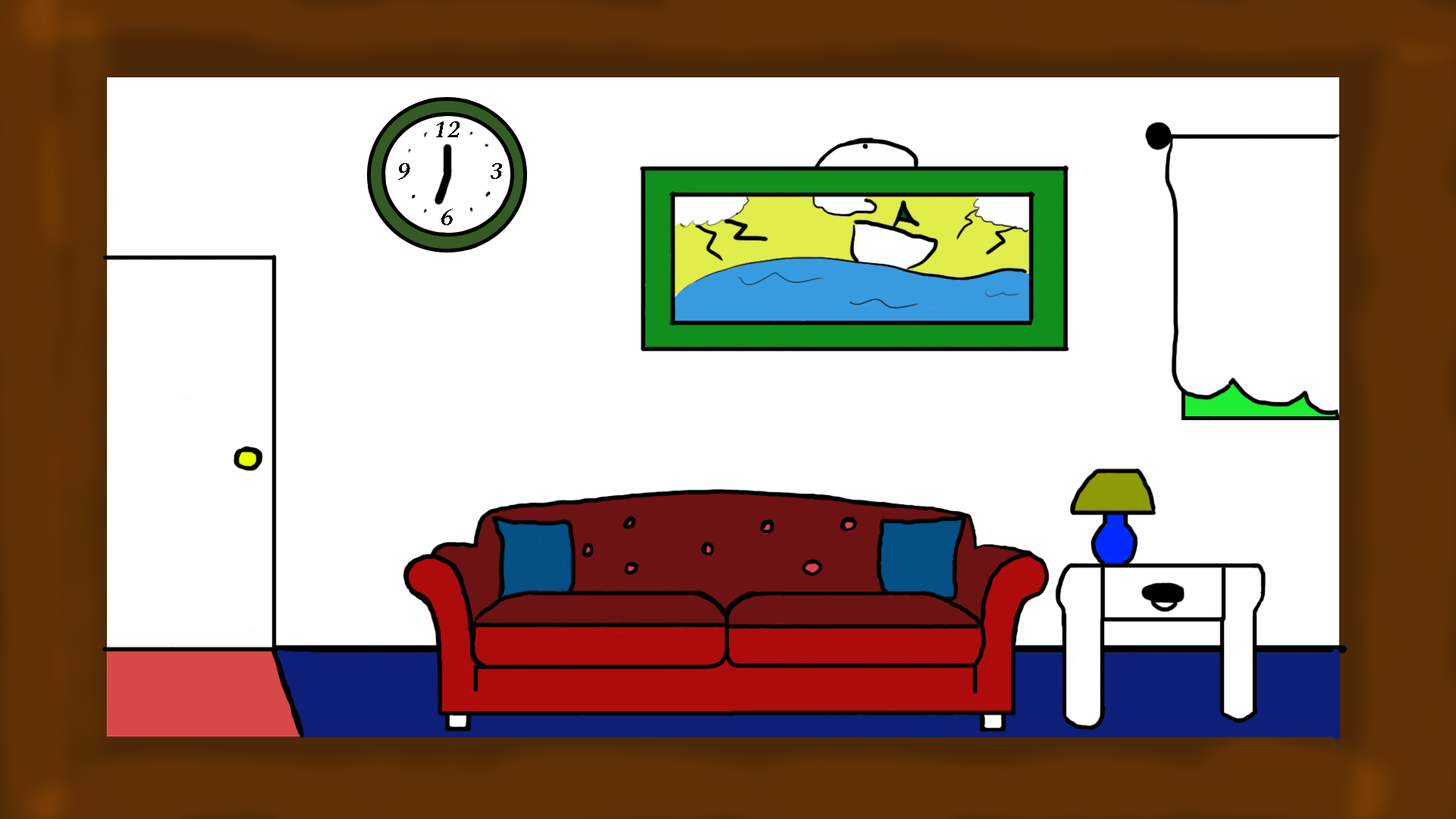
<style>
.page{position:relative;width:1456px;height:819px;background:#ffffff}
.page>*{position:absolute;margin:0}
.t1{font:25.3px "Spectral-SemiBoldItalic";color:#000000}
</style>
<div class="page">
<p class="t1" style="left:436px;top:121px;width:24px;height:16px">12</p>
<p class="t1" style="left:398px;top:163px;width:12px;height:17px">9</p>
<p class="t1" style="left:491px;top:163px;width:11px;height:16px">3</p>
<p class="t1" style="left:441px;top:209px;width:12px;height:16px">6</p>
</div>
